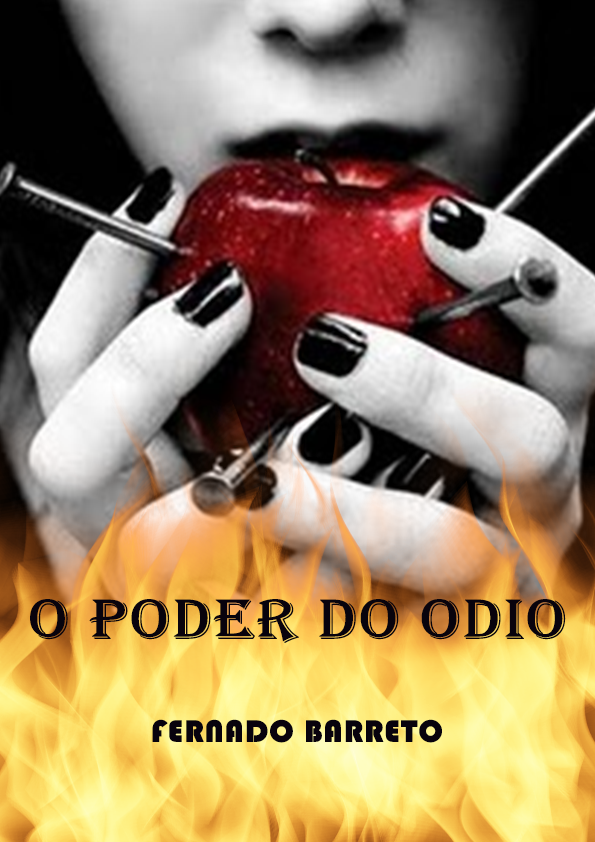
<style>
.page{position:relative;width:595px;height:842px}
.page>*{position:absolute;margin:0}
.t1{font:100px "Algerian";letter-spacing:0.01em;color:#08030d;text-transform:uppercase;font-weight:bold;scale:1.1 1}
.t2{font:55px "Bauhaus93";letter-spacing:0.01em;color:#08030d;text-transform:uppercase;font-weight:bold}
</style>
<div class="page">
<p class="t1" style="left:30px;top:599px;width:536px;height:44px">o poder do odio</p>
<p class="t2" style="left:152px;top:719px;width:290px;height:24px">fernado barreto</p>
</div>
